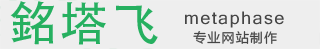
<style>
.page{position:relative;width:320px;height:49px;background:#eeeeee}
.page>*{position:absolute;margin:0}
.t1{font:47.3px "AdobeHeitiStd-Regular";letter-spacing:0.08em;color:#26b060}
.t2{font:16.9px "Kartika";letter-spacing:0.08em;color:#454545;scale:1.03 1}
.t3{font:12.8px "MicrosoftYaHei";letter-spacing:0.08em;color:#454545}
</style>
<div class="page">
<p class="t1" style="left:10px;top:1px;width:148px;height:44px">銘塔飞</p>
<p class="t2" style="left:185px;top:11px;width:99px;height:17px">metaphase</p>
<p class="t3" style="left:193px;top:31px;width:84px;height:13px">专业网站制作</p>
</div>
